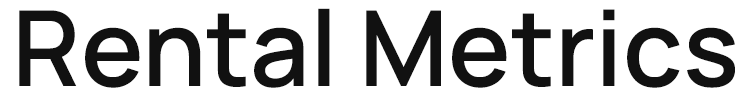
<style>
.page{position:relative;width:750px;height:99px;background:#ffffff}
.page>*{position:absolute;margin:0}
.t1{font:104.8px "Manrope-SemiBold";color:#111111}
</style>
<div class="page">
<p class="t1" style="left:19px;top:8px;width:716px;height:80px">Rental Metrics</p>
</div>
